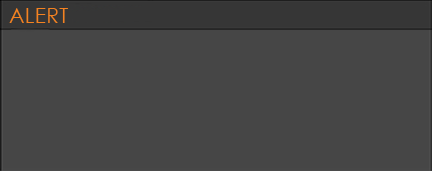
<style>
.page{position:relative;width:432px;height:171px;background:#464646}
.page>*{position:absolute;margin:0}
.t1{font:21.4px "CenturyGothic";color:#f48221}
</style>
<div class="page">
<p class="t1" style="left:9px;top:8px;width:59px;height:15px">ALERT</p>
</div>
